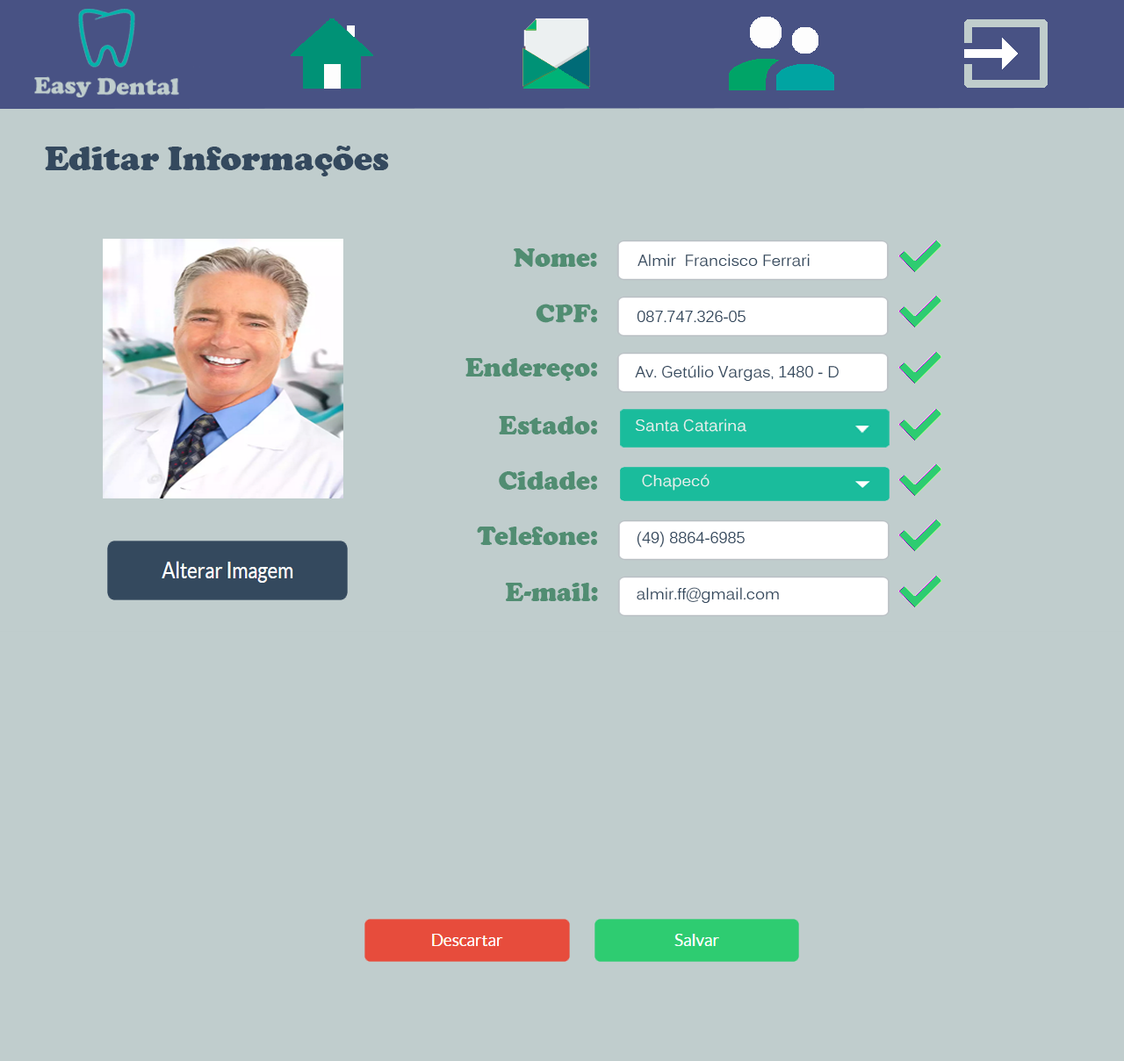
<style>
.page{position:relative;width:1124px;height:1061px;background:#c0cdcd}
.page>*{position:absolute;margin:0}
.t1{font:35.1px "CooperBlack";color:#34495e}
.t2{font:27.1px "CooperBlack";color:#518d72}
.t3{font:15.8px "Kalinga";color:#34495e}
.t4{font:26.3px "CooperBlack";color:#518d72}
.t5{font:15.8px "Kalinga";color:#e5f1ef}
</style>
<div class="page">
<p class="t1" style="left:45px;top:146px;width:344px;height:30px">Editar Informações</p>
<p class="t2" style="left:513px;top:248px;width:84px;height:19px">Nome:</p>
<p class="t3" style="left:637px;top:254px;width:172px;height:13px">Almir  Francisco Ferrari</p>
<p class="t4" style="left:535px;top:304px;width:62px;height:19px">CPF:</p>
<p class="t3" style="left:636px;top:311px;width:109px;height:12px">087.747.326-05</p>
<p class="t2" style="left:465px;top:358px;width:132px;height:23px">Endereço:</p>
<p class="t3" style="left:635px;top:365px;width:203px;height:16px">Av. Getúlio Vargas, 1480 - D</p>
<p class="t2" style="left:499px;top:416px;width:98px;height:19px">Estado:</p>
<p class="t5" style="left:635px;top:419px;width:111px;height:13px">Santa Catarina</p>
<p class="t2" style="left:499px;top:471px;width:98px;height:19px">Cidade:</p>
<p class="t5" style="left:642px;top:474px;width:67px;height:17px">Chapecó</p>
<p class="t2" style="left:477px;top:527px;width:120px;height:18px">Telefone:</p>
<p class="t3" style="left:636px;top:531px;width:108px;height:17px">(49) 8864-6985</p>
<p class="t2" style="left:505px;top:583px;width:93px;height:18px">E-mail:</p>
<p class="t3" style="left:636px;top:587px;width:143px;height:16px">almir.ff@gmail.com</p>
</div>
